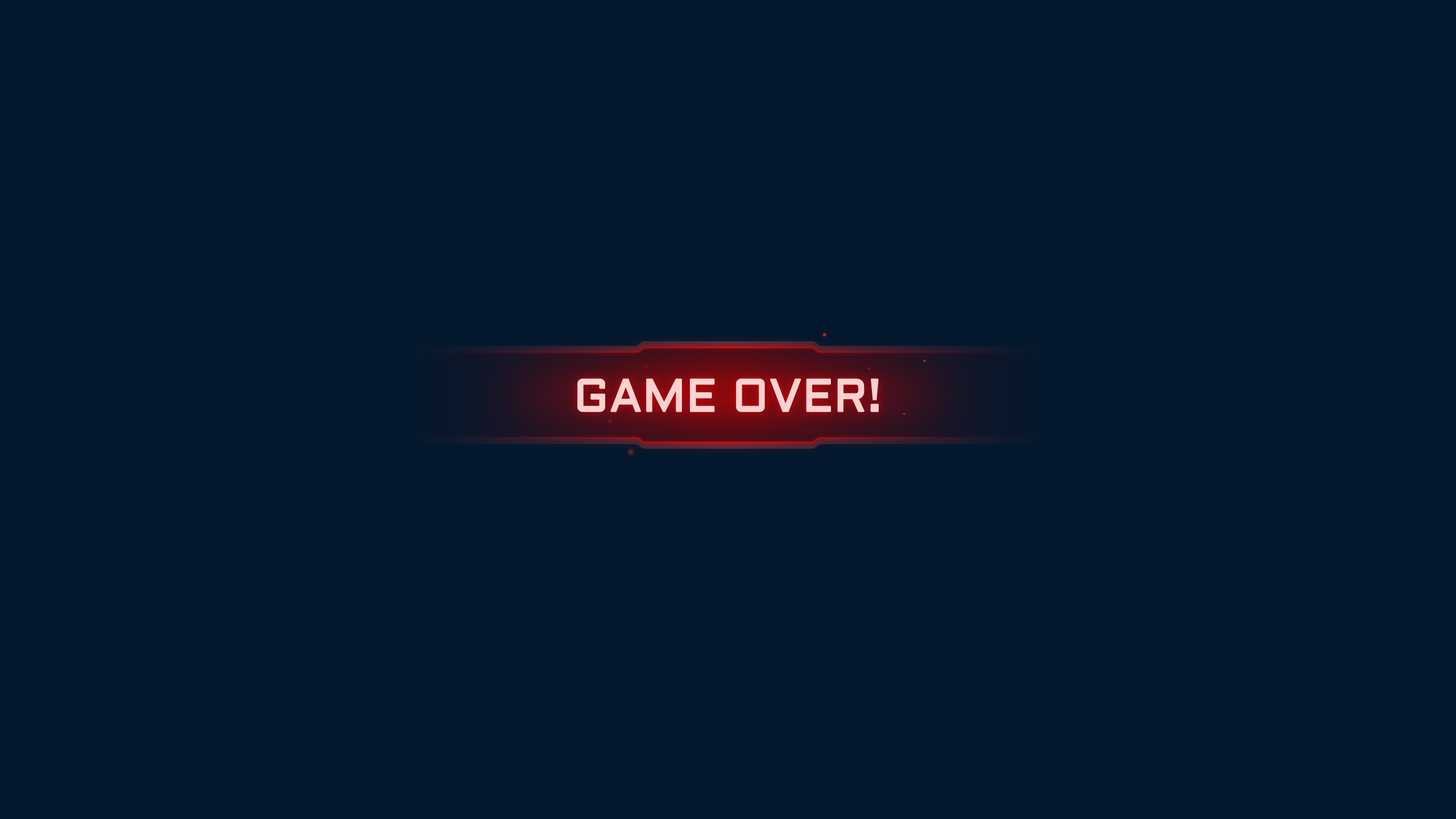
<style>
.page{position:relative;width:1456px;height:819px;background:#03182d}
.page>*{position:absolute;margin:0}
.t1{font:45.5px "Aldrich";color:#fed1d1;font-weight:bold}
</style>
<div class="page">
<p class="t1" style="left:577px;top:378px;width:302px;height:34px">GAME OVER!</p>
</div>
